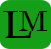
<style>
.page{position:relative;width:51px;height:49px;background:#149f17}
.page>*{position:absolute;margin:0}
.t1{font:39.2px "BookAntiqua";color:#000000;scale:1.28 1}
.t2{font:27.4px "Century";color:#000000;scale:1.14 1}
</style>
<div class="page">
<p class="t1" style="left:3px;top:11px;width:29px;height:27px">L</p>
<p class="t2" style="left:19px;top:11px;width:28px;height:20px">M</p>
</div>
